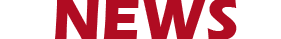
<style>
.page{position:relative;width:281px;height:39px;background:#ffffff}
.page>*{position:absolute;margin:0}
.t1{font:60px "ErasITC-Bold";color:#b00c22}
.t2{font:36px "ErasITC-Bold";color:#b00c22}
</style>
<div class="page">
<p class="t1" style="left:55px;top:0px;width:182px;height:40px"><span class="t2">       </span>NEWS</p>
</div>
